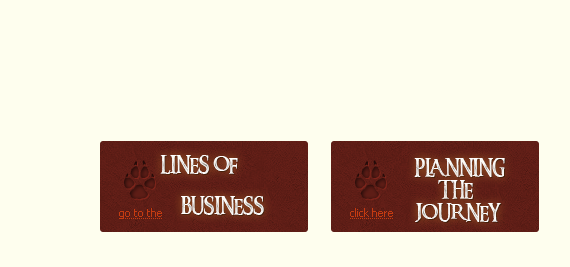
<style>
.page{position:relative;width:570px;height:267px;background:#fefeee}
.page>*{position:absolute;margin:0}
.t1{font:48px "AnimalTracks";color:#5e1d16}
.t2{font:18px "RingbearerMedium";color:#f8f8f3;text-transform:uppercase}
.t3{font:18px "RingbearerMedium";color:#f8f7f2;text-transform:uppercase}
.t4{font:18px "RingbearerMedium";color:#f2f1ec;text-transform:uppercase}
.t5{font:18px "RingbearerMedium";color:#f7f6f1;text-transform:uppercase}
.t6{font:11px "Tahoma";color:#c53b11}
.t7{font:18px "RingbearerMedium";color:#fbfaf7;text-transform:uppercase}
</style>
<div class="page">
<p class="t1" style="left:124px;top:160px;width:31px;height:40px">i</p>
<p class="t2" style="left:160px;top:155px;width:78px;height:19px">Lines of</p>
<p class="t1" style="left:355px;top:160px;width:31px;height:40px">i</p>
<p class="t3" style="left:414px;top:158px;width:91px;height:19px">planning</p>
<p class="t4" style="left:438px;top:180px;width:35px;height:19px">The</p>
<p class="t5" style="left:181px;top:196px;width:83px;height:19px">Business</p>
<p class="t6" style="left:119px;top:208px;width:43px;height:11px">go to the</p>
<p class="t6" style="left:350px;top:208px;width:43px;height:9px">click here</p>
<p class="t7" style="left:415px;top:203px;width:86px;height:19px">journey</p>
</div>
